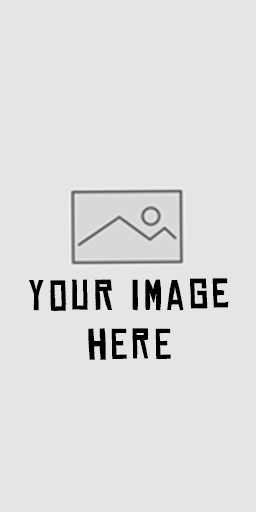
<style>
.page{position:relative;width:256px;height:512px;background:#e5e5e5}
.page>*{position:absolute;margin:0}
.t1{font:41px "ChineseRocksRg-Regular";letter-spacing:0.1em;color:#000000}
</style>
<div class="page">
<p class="t1" style="left:28px;top:278px;width:201px;height:82px;text-align:center">your image <br>here</p>
</div>
